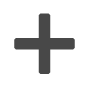
<style>
.page{position:relative;width:88px;height:88px;background:#ffffff}
.page>*{position:absolute;margin:0}
.t1{font:124px "SegoeUI";color:#484848;font-weight:bold}
</style>
<div class="page">
<p class="t1" style="left:14px;top:13px;width:61px;height:61px">+</p>
</div>
